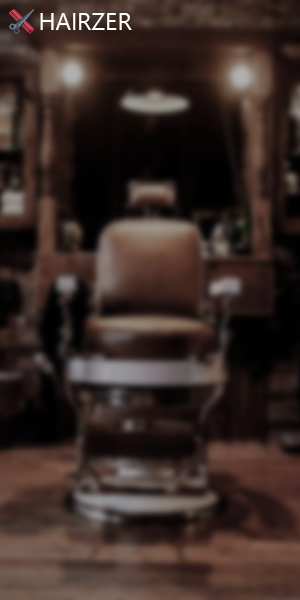
<style>
.page{position:relative;width:300px;height:600px}
.page>*{position:absolute;margin:0}
.t1{font:24px "Leelawadee";color:#ffffff}
</style>
<div class="page">
<p class="t1" style="left:40px;top:13px;width:92px;height:17px">HAIRZER</p>
</div>
